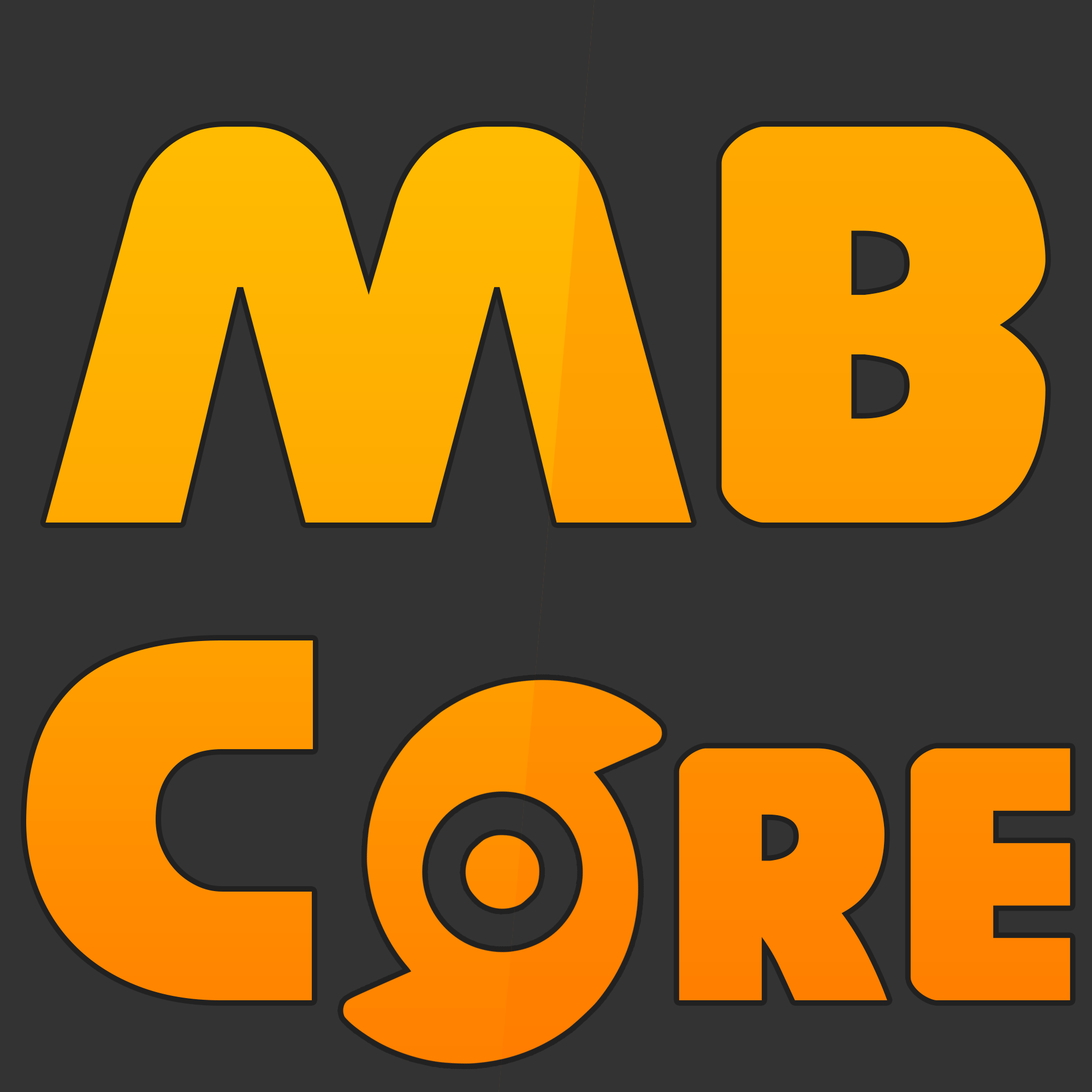
<style>
.page{position:relative;width:1092px;height:1092px;background:#333333}
.page>*{position:absolute;margin:0}
.t1{font:600.6px/477.7px "GovernorExpanded"}
.t2{font:546px/477.7px "GovernorExpanded"}
.t3{font:382.2px/477.7px "GovernorExpanded"}
</style>
<div class="page">
<p class="t1" style="left:26px;top:127px;width:1044px;height:873px;text-align:center">MB<br><span class="t2">C   </span><span class="t3">re</span></p>
</div>
